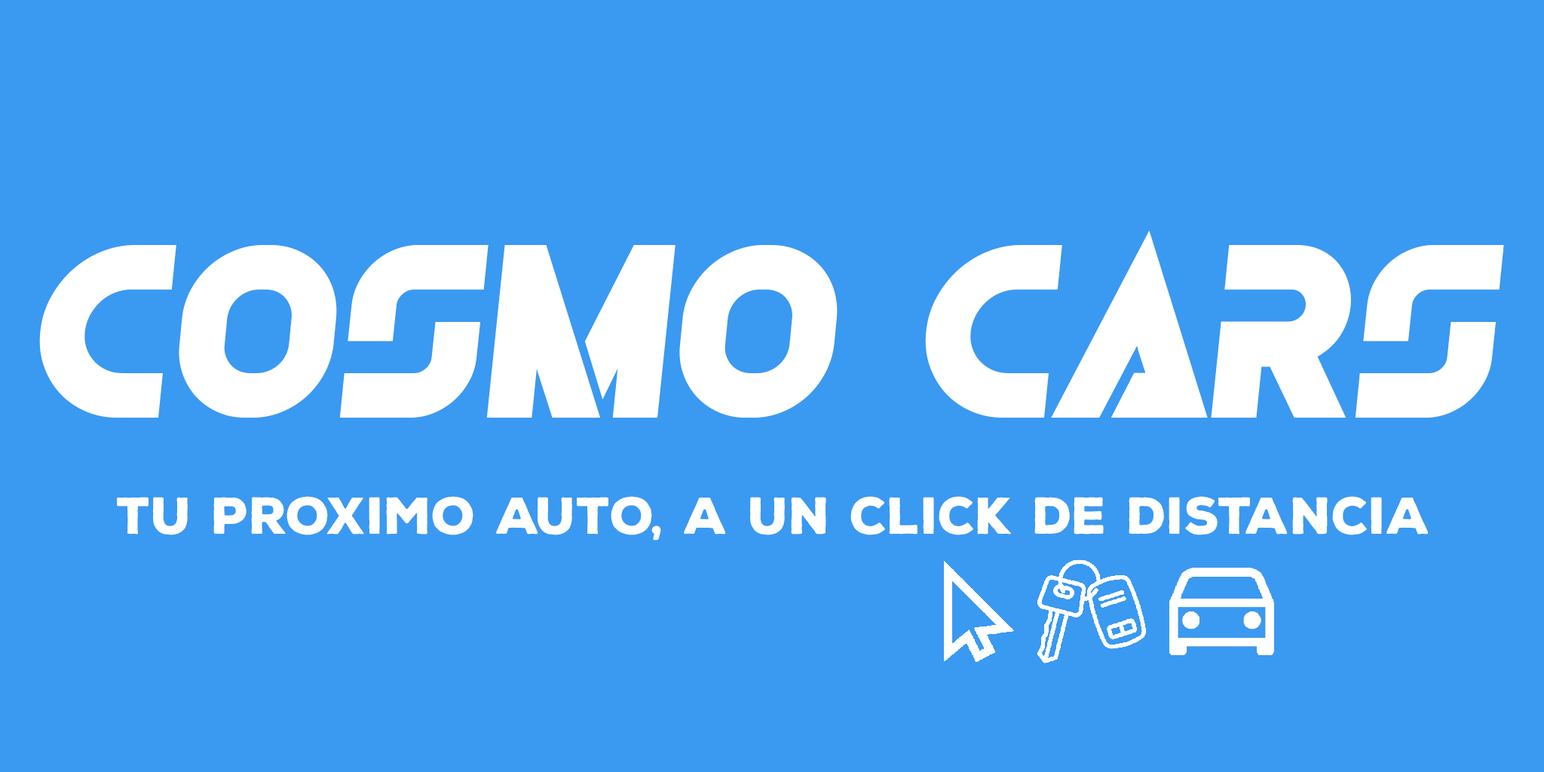
<style>
.page{position:relative;width:1544px;height:772px;background:#3a99f1}
.page>*{position:absolute;margin:0}
.t1{font:248.6px "Olga-BlackItalic";color:#ffffff}
.t2{font:50.3px "NexaRustSans-Black";color:#ffffff}
</style>
<div class="page">
<p class="t1" style="left:39px;top:231px;width:1465px;height:187px">Cosmo Cars</p>
<p class="t2" style="left:117px;top:496px;width:1312px;height:45px">TU PROXIMO AUTO, A UN CLICK DE DISTANCIA</p>
</div>
